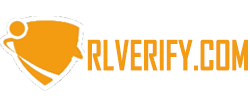
<style>
.page{position:relative;width:250px;height:110px;background:#ffffff}
.page>*{position:absolute;margin:0}
.t1{font:40.1px "AgencyFB-Bold";color:#f39c12;scale:0.84 1}
</style>
<div class="page">
<p class="t1" style="left:87px;top:39px;width:161px;height:32px">RLVERIFY.COM</p>
</div>
